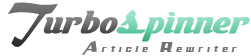
<style>
.page{position:relative;width:251px;height:56px;background:#ffffff}
.page>*{position:absolute;margin:0}
.t1{font:50px "MaturaMTScriptCapitals";color:#6d6d6d}
.t2{font:48px "LHFMilkman"}
.t3{font:48px "Magneto-Bold"}
.t4{font:14px "AirMillhouseItalic";letter-spacing:0.3em;color:#727272}
</style>
<div class="page">
<p class="t1" style="left:8px;top:2px;width:50px;height:45px">T</p>
<p class="t2" style="left:43px;top:10px;width:207px;height:32px">urbo<span class="t3">s</span>pinner</p>
<p class="t4" style="left:81px;top:40px;width:156px;height:15px">Article Rewriter</p>
</div>
